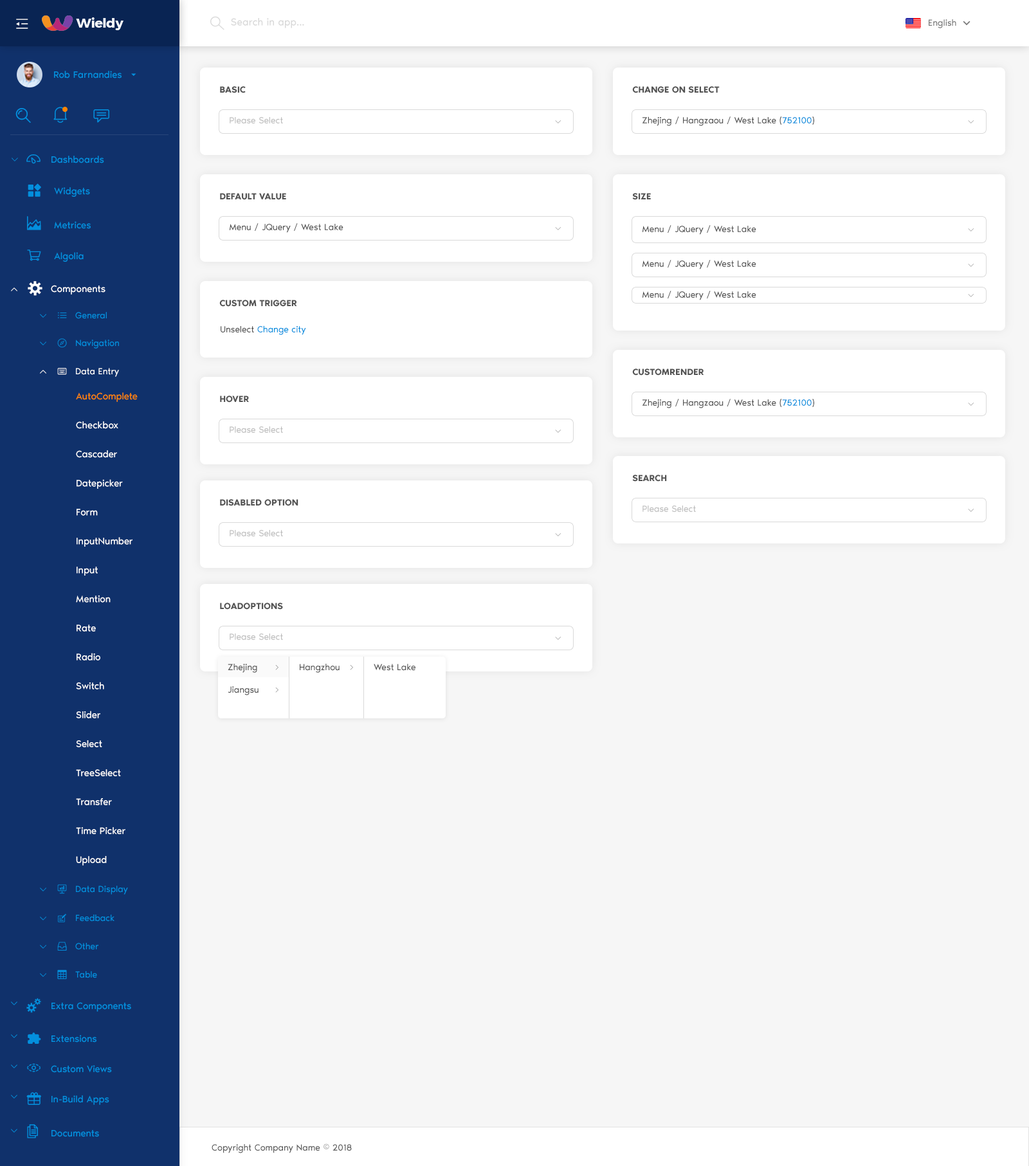
<style>
.page{position:relative;width:1029px;height:1166px;background:#f6f6f6}
.page>*{position:absolute;margin:0}
.t1{font:10.3px "NoirPro-Regular";color:#d9d9d9}
.t2{font:9px "NoirPro-Regular";color:#757575}
.t3{font:9.6px "NoirPro-Regular";color:#038fde}
.t4{font:9px "NoirPro-SemiBold";color:#535353;text-transform:uppercase}
.t5{font:9px "NoirPro-Regular";color:#bfbfbf}
.t6{font:10.3px "gaxondrift"}
.t7{font:9px "NoirPro-Regular";color:#545454}
.t8{font:9px "NoirPro-Regular";color:#038fde}
.t9{font:7.7px "gaxonant"}
.t10{font:14.1px "gaxonant";color:#038fde}
.t11{font:14.1px "gaxonant";color:#ffffff}
.t12{font:9.6px "NoirPro-Regular";color:#ffffff}
.t13{font:7.7px "gaxonant";color:#038fde}
.t14{font:9px "gaxonant";color:#038fde}
.t15{font:9px "gaxonant";color:#ffffff}
.t16{font:9px "NoirPro-Regular";color:#ffffff}
.t17{font:9.6px/25.7px "NoirPro-Regular";color:#ffffff}
.t18{font:9.6px/25.7px "NoirPro-Regular";color:#ff8400}
.t19{font:9px/22.5px "NoirPro-Regular";color:#545454}
.t20{font:9px/22.5px "gaxondrift"}
.t21{font:9px "gaxondrift"}
.t22{font:7.5px "gaxonant";color:#038fde}
.t23{font:9px "NoirPro-Regular";color:#595959}
</style>
<div class="page">
<p class="t1" style="left:231px;top:18px;width:73px;height:10px">Search in app...</p>
<p class="t2" style="left:928px;top:19px;width:28px;height:9px">English</p>
<p class="t3" style="left:54px;top:71px;width:68px;height:7px">Rob Farnandies</p>
<p class="t4" style="left:220px;top:86px;width:26px;height:7px">Basic</p>
<p class="t4" style="left:632px;top:86px;width:87px;height:7px">Change On Select</p>
<p class="t5" style="left:230px;top:117px;width:53px;height:6px">Please Select</p>
<p class="t6" style="left:555px;top:120px;width:6px;height:3px">0</p>
<p class="t7" style="left:642px;top:116px;width:172px;height:10px">Zhejing / Hangzaou / West Lake (<span class="t8">752100</span>)</p>
<p class="t6" style="left:968px;top:120px;width:6px;height:3px">0</p>
<p class="t9" style="left:12px;top:158px;width:6px;height:3px">2</p>
<p class="t10" style="left:26px;top:154px;width:14px;height:10px">-</p>
<p class="t3" style="left:51px;top:156px;width:53px;height:7px">Dashboards</p>
<p class="t3" style="left:54px;top:187px;width:36px;height:10px">Widgets</p>
<p class="t4" style="left:220px;top:193px;width:66px;height:7px">Default Value</p>
<p class="t4" style="left:632px;top:193px;width:19px;height:7px">Size</p>
<p class="t10" style="left:27px;top:216px;width:14px;height:14px">m</p>
<p class="t3" style="left:54px;top:221px;width:37px;height:8px">Metrices</p>
<p class="t7" style="left:229px;top:223px;width:114px;height:10px">Menu / JQuery / West Lake</p>
<p class="t6" style="left:555px;top:227px;width:6px;height:3px">0</p>
<p class="t7" style="left:642px;top:225px;width:114px;height:10px">Menu / JQuery / West Lake</p>
<p class="t6" style="left:968px;top:228px;width:6px;height:3px">0</p>
<p class="t3" style="left:54px;top:252px;width:30px;height:10px">Algolia</p>
<p class="t7" style="left:642px;top:260px;width:114px;height:9px">Menu / JQuery / West Lake</p>
<p class="t6" style="left:968px;top:264px;width:6px;height:3px">0</p>
<p class="t11" style="left:28px;top:281px;width:14px;height:15px">%</p>
<p class="t9" style="left:11px;top:287px;width:6px;height:4px">5</p>
<p class="t12" style="left:51px;top:285px;width:54px;height:9px">Components</p>
<p class="t7" style="left:642px;top:291px;width:114px;height:9px">Menu / JQuery / West Lake</p>
<p class="t6" style="left:968px;top:294px;width:6px;height:3px">0</p>
<p class="t4" style="left:219px;top:300px;width:78px;height:7px">Custom Trigger</p>
<p class="t13" style="left:40px;top:314px;width:6px;height:4px">2</p>
<p class="t14" style="left:58px;top:312px;width:9px;height:6px">h</p>
<p class="t8" style="left:75px;top:312px;width:32px;height:7px">General</p>
<p class="t8" style="left:221px;top:325px;width:85px;height:10px"><span class="t7">Unselect </span>Change city</p>
<p class="t13" style="left:40px;top:341px;width:6px;height:4px">2</p>
<p class="t8" style="left:76px;top:339px;width:43px;height:9px">Navigation</p>
<p class="t9" style="left:40px;top:370px;width:6px;height:4px">5</p>
<p class="t15" style="left:57px;top:368px;width:10px;height:7px">/</p>
<p class="t16" style="left:76px;top:368px;width:43px;height:9px">Data Entry</p>
<p class="t4" style="left:632px;top:368px;width:72px;height:7px">CustomRender</p>
<p class="t17" style="left:76px;top:392px;width:62px;height:473px"><span class="t18">AutoComplete<br></span>Checkbox<br>Cascader<br>Datepicker<br>Form<br>InputNumber<br>Input<br>Mention<br>Rate<br>Radio<br>Switch<br>Slider<br>Select<br>TreeSelect<br>Transfer<br>Time Picker<br>Upload</p>
<p class="t4" style="left:220px;top:395px;width:29px;height:7px">Hover</p>
<p class="t7" style="left:642px;top:399px;width:172px;height:9px">Zhejing / Hangzaou / West Lake (<span class="t8">752100</span>)</p>
<p class="t6" style="left:968px;top:402px;width:6px;height:4px">0</p>
<p class="t5" style="left:230px;top:426px;width:53px;height:7px">Please Select</p>
<p class="t6" style="left:555px;top:429px;width:6px;height:4px">0</p>
<p class="t4" style="left:632px;top:474px;width:35px;height:8px">Search</p>
<p class="t4" style="left:220px;top:499px;width:78px;height:7px">Disabled Option</p>
<p class="t5" style="left:642px;top:505px;width:54px;height:7px">Please Select</p>
<p class="t6" style="left:968px;top:509px;width:6px;height:3px">0</p>
<p class="t5" style="left:230px;top:530px;width:53px;height:6px">Please Select</p>
<p class="t6" style="left:555px;top:533px;width:6px;height:3px">0</p>
<p class="t4" style="left:220px;top:602px;width:63px;height:7px">LoadOptions</p>
<p class="t5" style="left:230px;top:633px;width:53px;height:7px">Please Select</p>
<p class="t6" style="left:555px;top:636px;width:6px;height:4px">0</p>
<p class="t19" style="left:228px;top:663px;width:30px;height:32px">Zhejing<br>Jiangsu</p>
<p class="t20" style="left:275px;top:665px;width:3px;height:27px">2<br>2</p>
<p class="t7" style="left:300px;top:663px;width:39px;height:9px">Hangzhou</p>
<p class="t21" style="left:350px;top:665px;width:3px;height:5px">2</p>
<p class="t7" style="left:374px;top:663px;width:41px;height:7px">West Lake</p>
<p class="t13" style="left:40px;top:887px;width:6px;height:4px">2</p>
<p class="t14" style="left:57px;top:884px;width:10px;height:10px">.</p>
<p class="t8" style="left:76px;top:885px;width:52px;height:9px">Data Display</p>
<p class="t13" style="left:40px;top:916px;width:6px;height:4px">2</p>
<p class="t8" style="left:76px;top:914px;width:38px;height:7px">Feedback</p>
<p class="t13" style="left:40px;top:944px;width:6px;height:4px">2</p>
<p class="t8" style="left:75px;top:942px;width:23px;height:8px">Other</p>
<p class="t13" style="left:40px;top:973px;width:6px;height:4px">2</p>
<p class="t8" style="left:75px;top:971px;width:22px;height:7px">Table</p>
<p class="t22" style="left:11px;top:1001px;width:6px;height:4px">2</p>
<p class="t3" style="left:51px;top:1002px;width:80px;height:9px">Extra Components</p>
<p class="t22" style="left:11px;top:1034px;width:6px;height:4px">2</p>
<p class="t3" style="left:51px;top:1034px;width:45px;height:8px">Extensions</p>
<p class="t22" style="left:11px;top:1064px;width:6px;height:4px">2</p>
<p class="t10" style="left:27px;top:1063px;width:13px;height:9px">,</p>
<p class="t3" style="left:51px;top:1065px;width:61px;height:7px">Custom Views</p>
<p class="t22" style="left:11px;top:1094px;width:6px;height:4px">2</p>
<p class="t3" style="left:51px;top:1095px;width:58px;height:9px">In-Build Apps</p>
<p class="t22" style="left:11px;top:1128px;width:6px;height:4px">2</p>
<p class="t10" style="left:27px;top:1124px;width:11px;height:14px">)</p>
<p class="t3" style="left:51px;top:1130px;width:48px;height:7px">Documents</p>
<p class="t23" style="left:212px;top:1143px;width:140px;height:10px">Copyright Company Name © 2018</p>
</div>
